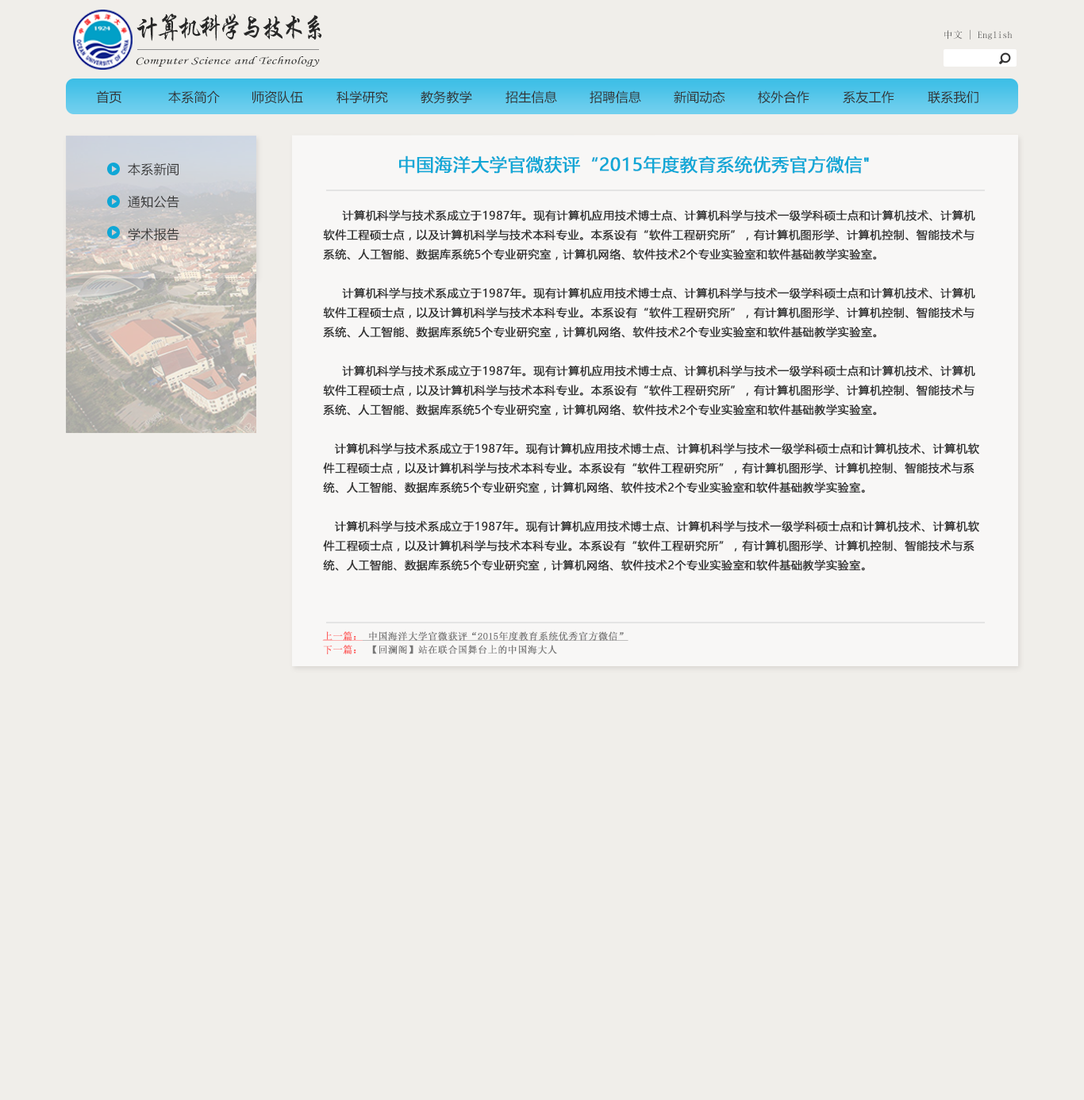
<style>
.page{position:relative;width:1084px;height:1100px;background:#f0eeea}
.page>*{position:absolute;margin:0}
.t1{font:27.6px "STXingkai";letter-spacing:-0.14em;color:#272727;scale:0.88 1}
.t2{font:9.5px "SimSun";letter-spacing:0.02em}
.t3{font:10.9px "STLiti";letter-spacing:0.02em;color:#272727;scale:1.34 1}
.t4{font:12.7px "MicrosoftYaHei";letter-spacing:0.02em;color:#333333}
.t5{font:17.5px "MicrosoftYaHei";letter-spacing:0.02em;color:#0fa7d6;font-weight:bold}
.t6{font:12.7px "MicrosoftYaHei";letter-spacing:0.02em;color:#383838}
.t7{font:11.1px "MicrosoftYaHei";letter-spacing:0.02em;color:#333333;font-weight:bold}
.t8{font:9.5px "SimSun";letter-spacing:0.02em;color:#767676;font-weight:bold;text-decoration:underline}
.t9{font:9.5px "SimSun";letter-spacing:0.02em;color:#fd5959;font-weight:bold;text-decoration:underline}
.t10{font:9.5px "SimSun";letter-spacing:0.02em;color:#767676;font-weight:bold}
.t11{font:9.5px "SimSun";letter-spacing:0.02em;color:#fd5959;font-weight:bold}
</style>
<div class="page">
<p class="t1" style="left:136px;top:13px;width:186px;height:28px">计算机科学与技术系</p>
<p class="t2" style="left:944px;top:29px;width:68px;height:11px">中文 | English</p>
<p class="t3" style="left:136px;top:56px;width:184px;height:11px">Computer Science and Technology</p>
<p class="t4" style="left:96px;top:90px;width:25px;height:14px">首页</p>
<p class="t4" style="left:168px;top:90px;width:52px;height:14px">本系简介</p>
<p class="t4" style="left:252px;top:90px;width:51px;height:14px">师资队伍</p>
<p class="t4" style="left:336px;top:90px;width:52px;height:14px">科学研究</p>
<p class="t4" style="left:420px;top:90px;width:52px;height:14px">教务教学</p>
<p class="t4" style="left:505px;top:90px;width:52px;height:14px">招生信息</p>
<p class="t4" style="left:589px;top:90px;width:52px;height:14px">招聘信息</p>
<p class="t4" style="left:674px;top:90px;width:51px;height:14px">新闻动态</p>
<p class="t4" style="left:758px;top:90px;width:51px;height:14px">校外合作</p>
<p class="t4" style="left:843px;top:90px;width:51px;height:14px">系友工作</p>
<p class="t4" style="left:927px;top:90px;width:51px;height:14px">联系我们</p>
<p class="t5" style="left:399px;top:155px;width:470px;height:19px">中国海洋大学官微获评“2015年度教育系统优秀官方微信"</p>
<p class="t6" style="left:128px;top:163px;width:50px;height:12px">本系新闻</p>
<p class="t6" style="left:128px;top:195px;width:51px;height:13px">通知公告</p>
<p class="t7" style="left:323px;top:209px;width:656px;height:362px">计算机科学与技术系成立于1987年。现有计算机应用技术博士点、计算机科学与技术一级学科硕士点和计算机技术、计算机软件工程硕士点，以及计算机科学与技术本科专业。本系设有“软件工程研究所”，有计算机图形学、计算机控制、智能技术与系统、人工智能、数据库系统5个专业研究室，计算机网络、软件技术2个专业实验室和软件基础教学实验室。<br><br>     计算机科学与技术系成立于1987年。现有计算机应用技术博士点、计算机科学与技术一级学科硕士点和计算机技术、计算机软件工程硕士点，以及计算机科学与技术本科专业。本系设有“软件工程研究所”，有计算机图形学、计算机控制、智能技术与系统、人工智能、数据库系统5个专业研究室，计算机网络、软件技术2个专业实验室和软件基础教学实验室。<br><br>     计算机科学与技术系成立于1987年。现有计算机应用技术博士点、计算机科学与技术一级学科硕士点和计算机技术、计算机软件工程硕士点，以及计算机科学与技术本科专业。本系设有“软件工程研究所”，有计算机图形学、计算机控制、智能技术与系统、人工智能、数据库系统5个专业研究室，计算机网络、软件技术2个专业实验室和软件基础教学实验室。<br><br>   计算机科学与技术系成立于1987年。现有计算机应用技术博士点、计算机科学与技术一级学科硕士点和计算机技术、计算机软件工程硕士点，以及计算机科学与技术本科专业。本系设有“软件工程研究所”，有计算机图形学、计算机控制、智能技术与系统、人工智能、数据库系统5个专业研究室，计算机网络、软件技术2个专业实验室和软件基础教学实验室。<br><br>   计算机科学与技术系成立于1987年。现有计算机应用技术博士点、计算机科学与技术一级学科硕士点和计算机技术、计算机软件工程硕士点，以及计算机科学与技术本科专业。本系设有“软件工程研究所”，有计算机图形学、计算机控制、智能技术与系统、人工智能、数据库系统5个专业研究室，计算机网络、软件技术2个专业实验室和软件基础教学实验室。</p>
<p class="t6" style="left:128px;top:228px;width:51px;height:13px">学术报告</p>
<p class="t8" style="left:322px;top:631px;width:306px;height:10px"><span class="t9">上一篇：</span> 中国海洋大学官微获评“2015年度教育系统优秀官方微信”</p>
<p class="t10" style="left:323px;top:645px;width:234px;height:9px"><span class="t11">下一篇：</span> 【回澜阁】站在联合国舞台上的中国海大人</p>
</div>
